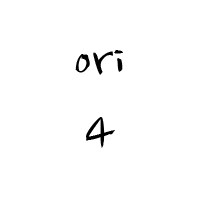
<style>
.page{position:relative;width:200px;height:200px;background:#ffffff}
.page>*{position:absolute;margin:0}
.t1{font:60px/72px "NanumBrush";color:#010000}
</style>
<div class="page">
<p class="t1" style="left:75px;top:50px;width:48px;height:98px;text-align:center">ori<br>4</p>
</div>
